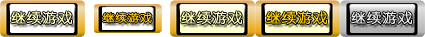
<style>
.page{position:relative;width:425px;height:37px}
.page>*{position:absolute;margin:0}
.t1{font:13.3px "YouYuan";color:#fffeb0;font-weight:bold;scale:1.14 1}
.t2{font:10.7px "YouYuan";color:#ffc600;font-weight:bold;scale:1.14 1}
.t3{font:13.3px "YouYuan";color:#ffd100;font-weight:bold;scale:1.14 1}
.t4{font:13.3px "YouYuan";color:#eaeaea;font-weight:bold;scale:1.14 1}
</style>
<div class="page">
<p class="t1" style="left:11px;top:11px;width:61px;height:14px">继续游戏</p>
<p class="t2" style="left:102px;top:12px;width:50px;height:11px">继续游戏</p>
<p class="t1" style="left:181px;top:11px;width:61px;height:14px">继续游戏</p>
<p class="t3" style="left:266px;top:11px;width:61px;height:14px">继续游戏</p>
<p class="t4" style="left:351px;top:11px;width:61px;height:14px">继续游戏</p>
</div>
